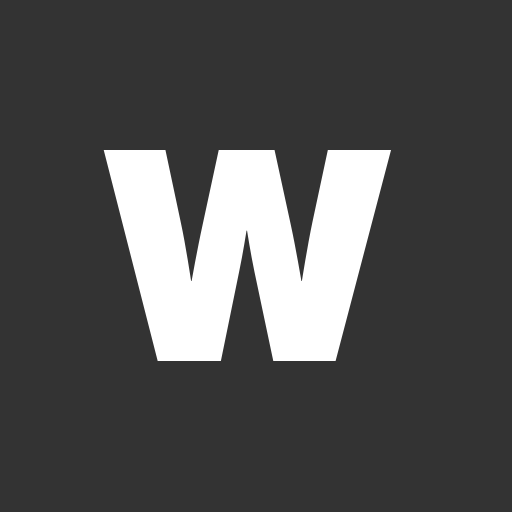
<style>
.page{position:relative;width:512px;height:512px;background:#333333}
.page>*{position:absolute;margin:0}
.t1{font:295px "NHaasGroteskDSPro-95Blk";color:#ffffff}
</style>
<div class="page">
<p class="t1" style="left:103px;top:150px;width:288px;height:211px">W</p>
</div>
